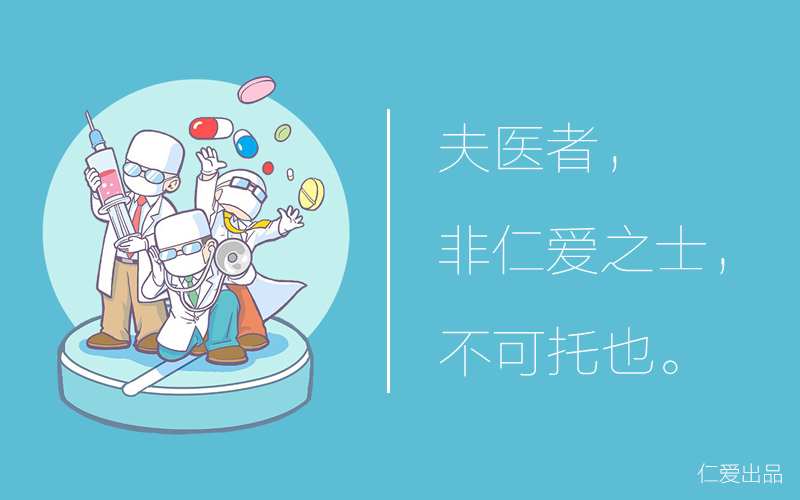
<style>
.page{position:relative;width:800px;height:500px;background:#5dbdd5}
.page>*{position:absolute;margin:0}
.t1{font:54.2px "FZLTCXHJW--GB1-0";color:#ffffff}
.t2{font:21.7px "FZLTCXHJW--GB1-0";color:#ffffff}
</style>
<div class="page">
<p class="t1" style="left:439px;top:122px;width:178px;height:51px">夫医者，</p>
<p class="t1" style="left:439px;top:225px;width:286px;height:50px">非仁爱之士，</p>
<p class="t1" style="left:440px;top:326px;width:238px;height:51px">不可托也。</p>
<p class="t2" style="left:697px;top:463px;width:85px;height:21px">仁爱出品</p>
</div>
